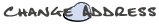
<style>
.page{position:relative;width:159px;height:24px;background:#ffffff}
.page>*{position:absolute;margin:0}
.t1{font:14px "FatboySlimBLTC(BRK)";letter-spacing:0.05em;color:#444341;font-weight:bold}
</style>
<div class="page">
<p class="t1" style="left:3px;top:5px;width:153px;height:14px">Change Address</p>
</div>
